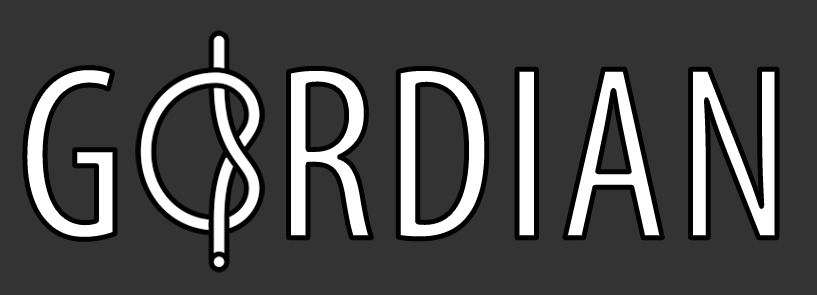
<style>
.page{position:relative;width:817px;height:295px;background:#333333}
.page>*{position:absolute;margin:0}
.t1{font:250px "MyriadPro-Cond";letter-spacing:0.03em;color:#ffffff}
</style>
<div class="page">
<p class="t1" style="left:24px;top:67px;width:753px;height:173px">G   RDIAN</p>
</div>
